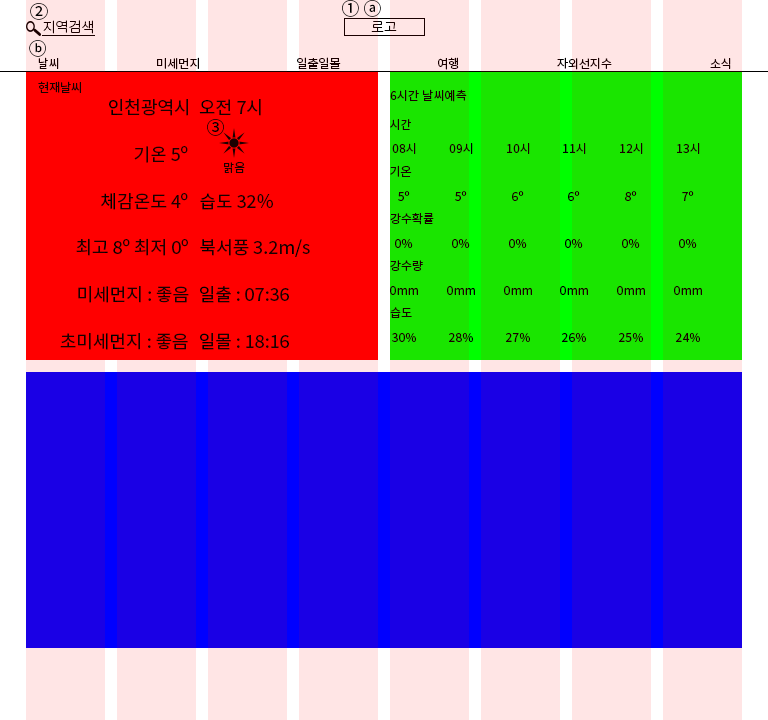
<style>
.page{position:relative;width:768px;height:720px;background:#1a00e5}
.page>*{position:absolute;margin:0}
.t1{font:18px "NotoSansKR-Regular";color:#000000}
.t2{font:14px "NotoSansKR-Light";color:#1a0000}
.t3{font:14px "NotoSansKR-Light"}
.t4{font:12px "NotoSansKR-Regular";color:#1a0000}
.t5{font:18px "NotoSansKR-Regular";color:#1a0000}
.t6{font:12px "NotoSansKR-Regular"}
</style>
<div class="page">
<p class="t1" style="left:30px;top:3px;width:18px;height:17px">②</p>
<p class="t1" style="left:342px;top:0px;width:39px;height:17px">① ⓐ</p>
<p class="t2" style="left:43px;top:20px;width:50px;height:14px">지역검색</p>
<p class="t3" style="left:371px;top:21px;width:26px;height:11px">로고</p>
<p class="t1" style="left:29px;top:40px;width:17px;height:17px">ⓑ</p>
<p class="t4" style="left:38px;top:57px;width:21px;height:12px">날씨</p>
<p class="t4" style="left:157px;top:57px;width:42px;height:13px">미세먼지</p>
<p class="t4" style="left:297px;top:57px;width:44px;height:12px">일출일몰</p>
<p class="t4" style="left:438px;top:57px;width:21px;height:13px">여행</p>
<p class="t4" style="left:557px;top:57px;width:55px;height:13px">자외선지수</p>
<p class="t4" style="left:710px;top:58px;width:21px;height:11px">소식</p>
<p class="t4" style="left:38px;top:81px;width:43px;height:12px">현재날씨</p>
<p class="t4" style="left:390px;top:89px;width:77px;height:13px">6시간 날씨예측</p>
<p class="t5" style="left:109px;top:98px;width:79px;height:18px">인천광역시</p>
<p class="t5" style="left:199px;top:99px;width:62px;height:17px">오전 7시</p>
<p class="t1" style="left:207px;top:119px;width:17px;height:17px">③</p>
<p class="t4" style="left:390px;top:119px;width:21px;height:11px">시간</p>
<p class="t5" style="left:134px;top:146px;width:54px;height:17px">기온 5º</p>
<p class="t4" style="left:392px;top:143px;width:24px;height:11px">08시</p>
<p class="t4" style="left:449px;top:143px;width:24px;height:11px">09시</p>
<p class="t4" style="left:507px;top:143px;width:23px;height:11px">10시</p>
<p class="t6" style="left:563px;top:143px;width:23px;height:11px">11시</p>
<p class="t4" style="left:620px;top:143px;width:23px;height:11px">12시</p>
<p class="t4" style="left:677px;top:143px;width:23px;height:11px">13시</p>
<p class="t4" style="left:224px;top:162px;width:21px;height:11px">맑음</p>
<p class="t4" style="left:390px;top:165px;width:22px;height:12px">기온</p>
<p class="t5" style="left:101px;top:193px;width:87px;height:17px">체감온도 4º</p>
<p class="t5" style="left:200px;top:193px;width:73px;height:17px">습도 32%</p>
<p class="t4" style="left:398px;top:191px;width:12px;height:10px">5º</p>
<p class="t4" style="left:455px;top:191px;width:12px;height:10px">5º</p>
<p class="t4" style="left:512px;top:191px;width:12px;height:10px">6º</p>
<p class="t6" style="left:568px;top:191px;width:12px;height:10px">6º</p>
<p class="t4" style="left:625px;top:191px;width:12px;height:10px">8º</p>
<p class="t4" style="left:682px;top:191px;width:12px;height:10px">7º</p>
<p class="t4" style="left:390px;top:213px;width:44px;height:12px">강수확률</p>
<p class="t5" style="left:76px;top:238px;width:112px;height:18px">최고 8º 최저 0º</p>
<p class="t5" style="left:200px;top:239px;width:110px;height:18px">북서풍 3.2m/s</p>
<p class="t4" style="left:395px;top:239px;width:18px;height:9px">0%</p>
<p class="t4" style="left:452px;top:239px;width:18px;height:9px">0%</p>
<p class="t4" style="left:509px;top:239px;width:18px;height:9px">0%</p>
<p class="t6" style="left:565px;top:239px;width:18px;height:9px">0%</p>
<p class="t4" style="left:622px;top:239px;width:18px;height:9px">0%</p>
<p class="t4" style="left:679px;top:239px;width:18px;height:9px">0%</p>
<p class="t4" style="left:390px;top:260px;width:33px;height:11px">강수량</p>
<p class="t5" style="left:78px;top:286px;width:111px;height:17px">미세먼지 : 좋음</p>
<p class="t5" style="left:200px;top:286px;width:89px;height:17px">일출 : 07:36</p>
<p class="t4" style="left:390px;top:286px;width:28px;height:9px">0mm</p>
<p class="t4" style="left:447px;top:286px;width:28px;height:9px">0mm</p>
<p class="t4" style="left:504px;top:286px;width:28px;height:9px">0mm</p>
<p class="t6" style="left:560px;top:286px;width:28px;height:9px">0mm</p>
<p class="t4" style="left:617px;top:286px;width:28px;height:9px">0mm</p>
<p class="t4" style="left:674px;top:286px;width:28px;height:9px">0mm</p>
<p class="t4" style="left:390px;top:307px;width:22px;height:11px">습도</p>
<p class="t5" style="left:60px;top:333px;width:128px;height:17px">초미세먼지 : 좋음</p>
<p class="t5" style="left:200px;top:333px;width:89px;height:17px">일몰 : 18:16</p>
<p class="t4" style="left:392px;top:333px;width:24px;height:9px">30%</p>
<p class="t4" style="left:449px;top:333px;width:24px;height:9px">28%</p>
<p class="t4" style="left:506px;top:333px;width:24px;height:9px">27%</p>
<p class="t6" style="left:562px;top:333px;width:24px;height:9px">26%</p>
<p class="t4" style="left:619px;top:333px;width:24px;height:9px">25%</p>
<p class="t4" style="left:676px;top:333px;width:24px;height:9px">24%</p>
</div>
